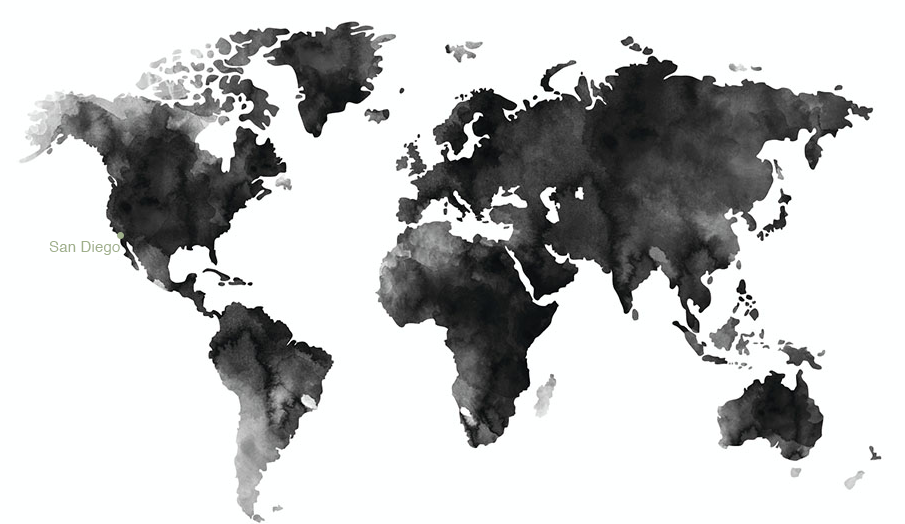
<style>
.page{position:relative;width:905px;height:524px;background:#feffff}
.page>*{position:absolute;margin:0}
.t1{font:15px "Helvetica";letter-spacing:0.01em;color:#9faf8b}
</style>
<div class="page">
<p class="t1" style="left:49px;top:241px;width:71px;height:14px">San Diego</p>
</div>
